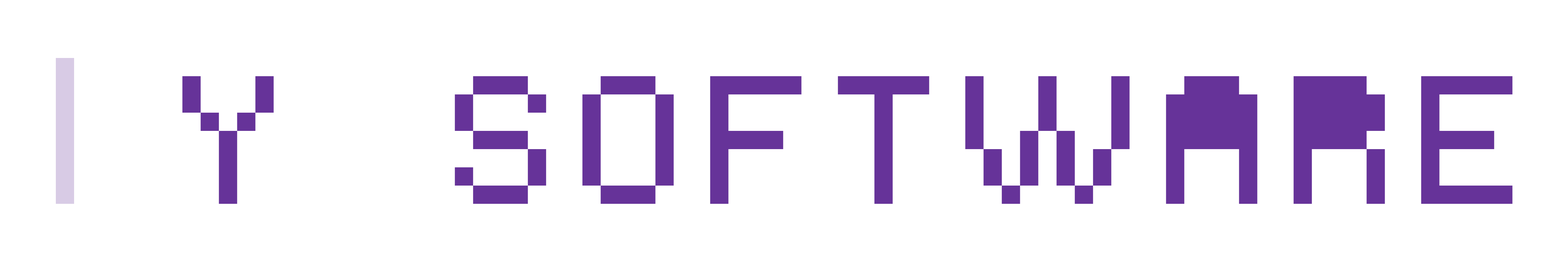
<style>
.page{position:relative;width:1568px;height:280px;background:#ffffff}
.page>*{position:absolute;margin:0}
.t1{font:182.5px "Yapix";color:#d8cbe5}
.t2{font:182.5px "Yapix";color:#663399}
</style>
<div class="page">
<p class="t1" style="left:55px;top:58px;width:19px;height:146px">|</p>
<p class="t2" style="left:182px;top:76px;width:1331px;height:128px">Y  SOFTWARE</p>
</div>
